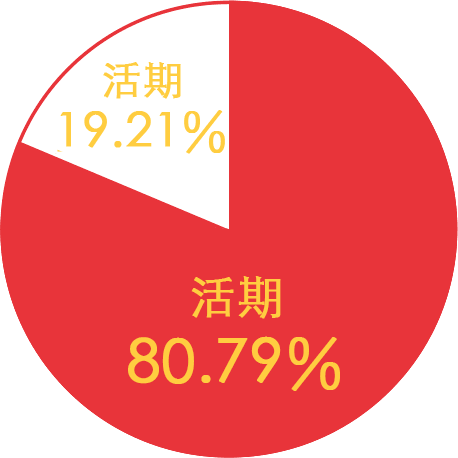
<style>
.page{position:relative;width:458px;height:458px;background:#e8343a}
.page>*{position:absolute;margin:0}
.t1{font:48px/48px "STHeitiSC-Light";color:#ffcd40;font-weight:bold}
.t2{font:40px/48px "STHeitiSC-Light";color:#ffcd40;font-weight:bold}
.t3{font:60px/60px "STHeitiSC-Light";color:#ffcd40;font-weight:bold}
.t4{font:46px/60px "STHeitiSC-Light";color:#ffcd40;font-weight:bold}
</style>
<div class="page">
<p class="t1" style="left:60px;top:62px;width:165px;height:92px;text-align:center"><span class="t2">活期<br></span>19.21％</p>
<p class="t3" style="left:128px;top:276px;width:212px;height:115px;text-align:center"><span class="t4">活期<br></span>80.79％</p>
</div>
